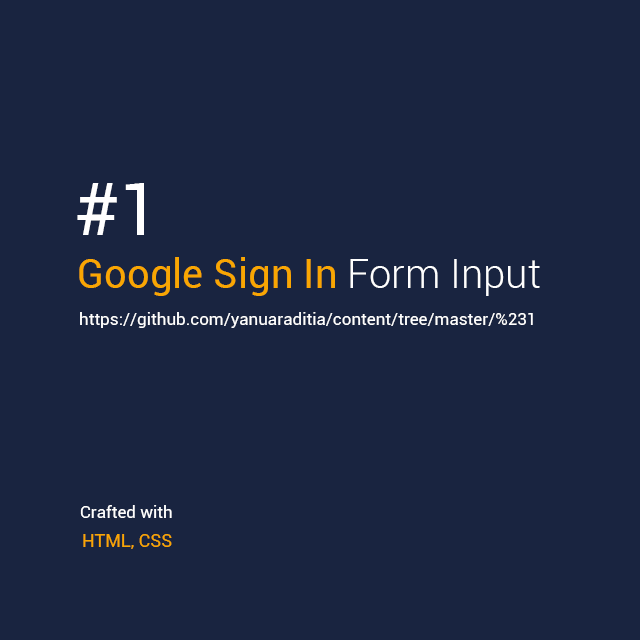
<style>
.page{position:relative;width:640px;height:640px;background:#192440}
.page>*{position:absolute;margin:0}
.t1{font:72px "Roboto-Regular";color:#ffffff}
.t2{font:40px "Roboto-Regular";color:#f9a602}
.t3{font:40px "Roboto-Light";color:#ffffff}
.t4{font:17px "Roboto-Regular";color:#ffffff}
.t5{font:18px "Roboto-Regular";color:#f9a602}
</style>
<div class="page">
<p class="t1" style="left:77px;top:183px;width:67px;height:52px">#1</p>
<p class="t2" style="left:79px;top:257px;width:461px;height:39px">Google Sign In <span class="t3">Form Input</span></p>
<p class="t4" style="left:80px;top:312px;width:453px;height:16px">https://github.com/yanuaraditia/content/tree/master/%231</p>
<p class="t4" style="left:80px;top:505px;width:92px;height:13px">Crafted with</p>
<p class="t5" style="left:83px;top:534px;width:89px;height:15px">HTML, CSS</p>
</div>
